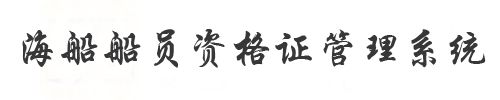
<style>
.page{position:relative;width:500px;height:100px;background:#ffffff}
.page>*{position:absolute;margin:0}
.t1{font:43px "STXingkai";color:#373738}
</style>
<div class="page">
<p class="t1" style="left:22px;top:29px;width:464px;height:39px">海船船员资格证管理系统</p>
</div>
